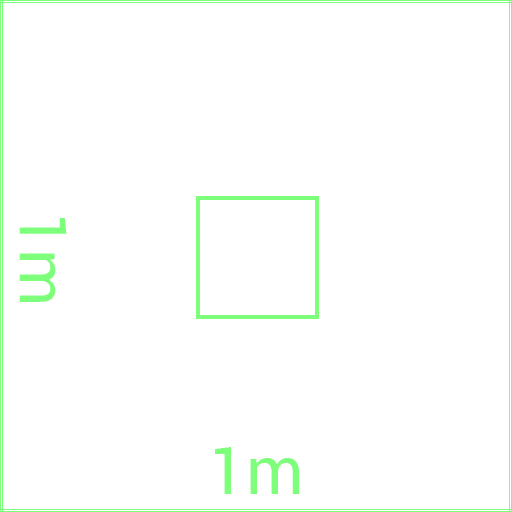
<style>
.page{position:relative;width:512px;height:512px;background:#ffffff}
.page>*{position:absolute;margin:0}
.t1{font:65.6px "Roboto-Regular";color:#7eff7b}
</style>
<div class="page">
<p class="t1" style="left:19px;top:218px;width:48px;height:84px;rotate:90deg">1m</p>
<p class="t1" style="left:215px;top:447px;width:85px;height:47px">1m</p>
</div>
